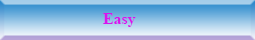
<style>
.page{position:relative;width:255px;height:40px}
.page>*{position:absolute;margin:0}
.t1{font:15.8px "TimesNewRomanPS-BoldMT";color:#d815ed}
</style>
<div class="page">
<p class="t1" style="left:103px;top:13px;width:33px;height:14px">Easy</p>
</div>
